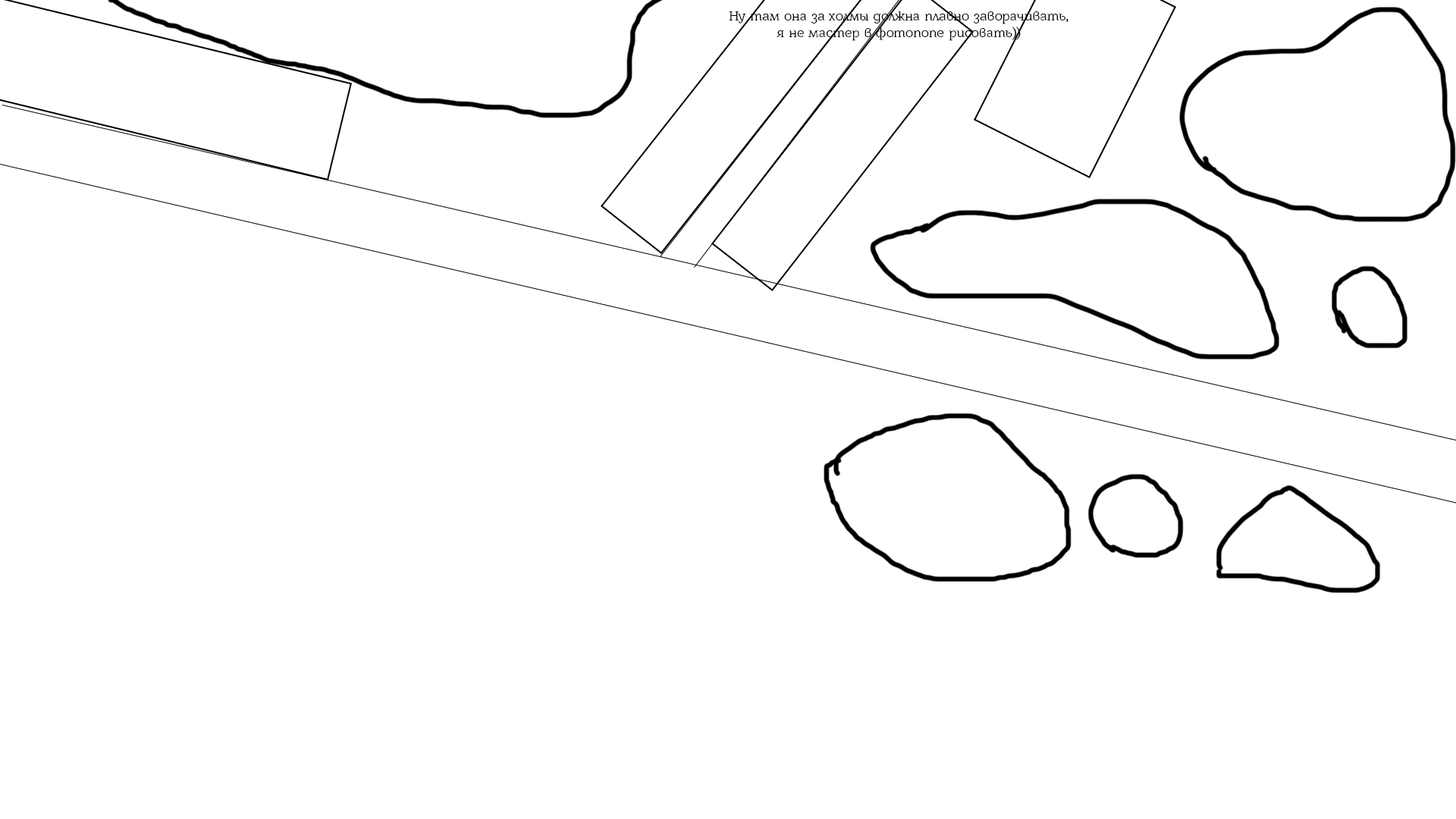
<style>
.page{position:relative;width:1456px;height:819px;background:#ffffff}
.page>*{position:absolute;margin:0}
.t1{font:13.6px "Barkentina";color:#000000}
</style>
<div class="page">
<p class="t1" style="left:729px;top:11px;width:339px;height:30px;text-align:center">Ну там она за холмы должна плавно заворачивать,<br>я не мастер в фотопопе рисовать))</p>
</div>
